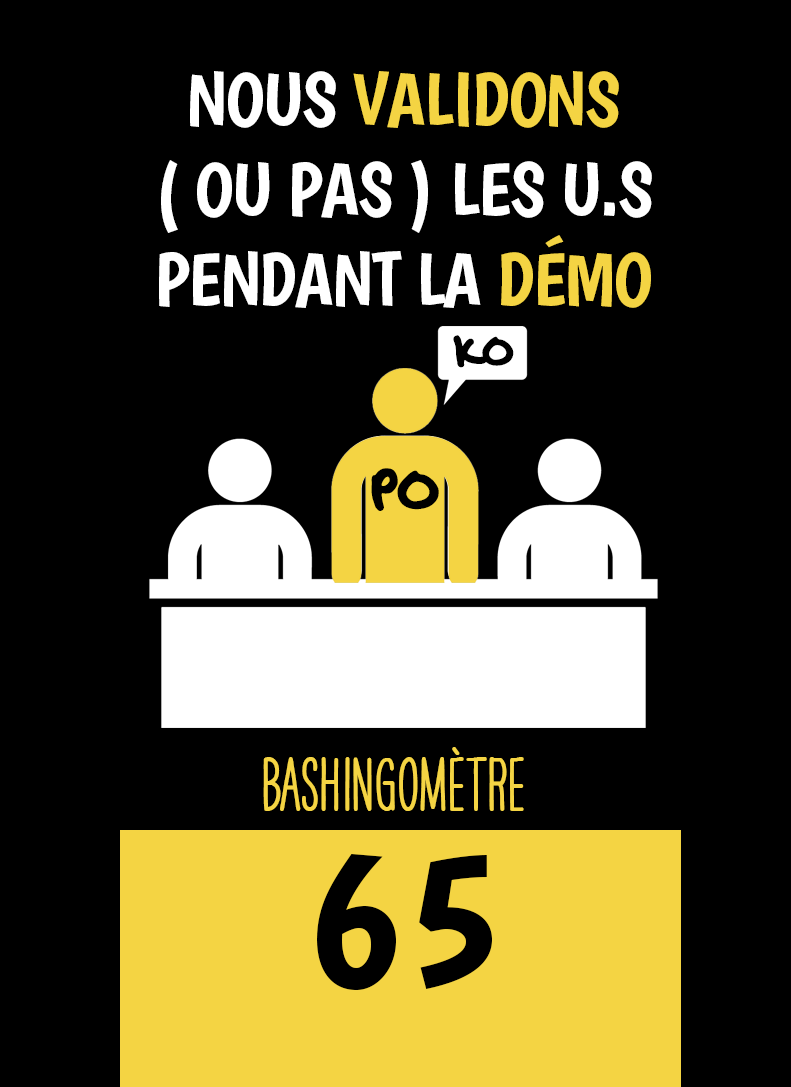
<style>
.page{position:relative;width:791px;height:1087px;background:#000000}
.page>*{position:absolute;margin:0}
.t1{font:75px "Boogaloo-Regular";letter-spacing:-0.02em;color:#ffffff}
.t2{font:75px "Boogaloo-Regular";letter-spacing:-0.02em;color:#f4d443}
.t3{font:50px "OakStreetW01-Regular";color:#000000}
.t4{font:66.7px "OakStreetW01-Regular";color:#000000}
.t5{font:66.7px "HAVEANICEDAYTallW04-Bold";color:#f4d443}
.t6{font:200px "Boogaloo-Regular";color:#000000}
</style>
<div class="page">
<p class="t1" style="left:159px;top:71px;width:493px;height:237px;text-align:center">NOUS <span class="t2">VALIDONS</span> <br>( OU PAS ) LES U.S<br>PENDANT LA <span class="t2">DÉMO</span></p>
<p class="t3" style="left:453px;top:335px;width:61px;height:33px">KO</p>
<p class="t4" style="left:371px;top:468px;width:68px;height:43px">PO</p>
<p class="t5" style="left:263px;top:747px;width:261px;height:64px">BASHINgomètre</p>
<p class="t6" style="left:317px;top:854px;width:175px;height:136px">65</p>
</div>
